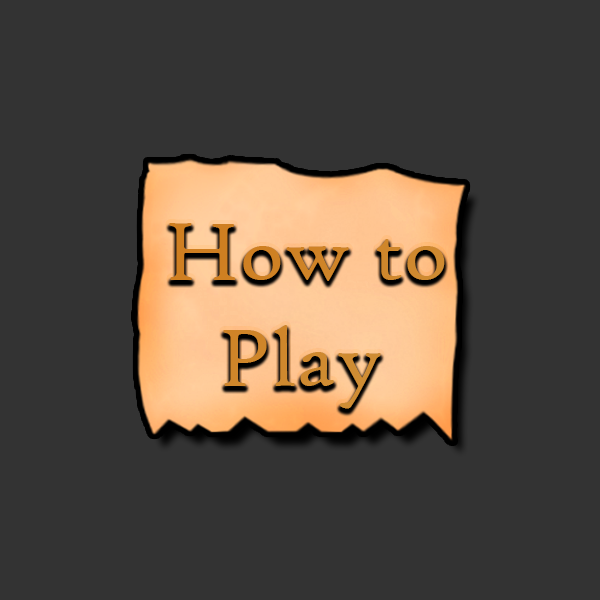
<style>
.page{position:relative;width:600px;height:600px;background:#333333}
.page>*{position:absolute;margin:0}
.t1{font:88.4px "HighTowerText-Reg";color:#cf8529}
</style>
<div class="page">
<p class="t1" style="left:169px;top:223px;width:276px;height:186px">How to <br> Play</p>
</div>
